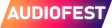
<style>
.page{position:relative;width:112px;height:28px}
.page>*{position:absolute;margin:0}
.t1{font:17.7px "Bahnschrift-Bold";color:#ffffff;scale:1.09 1}
</style>
<div class="page">
<p class="t1" style="left:7px;top:6px;width:99px;height:14px">AUDIOFEST</p>
</div>
